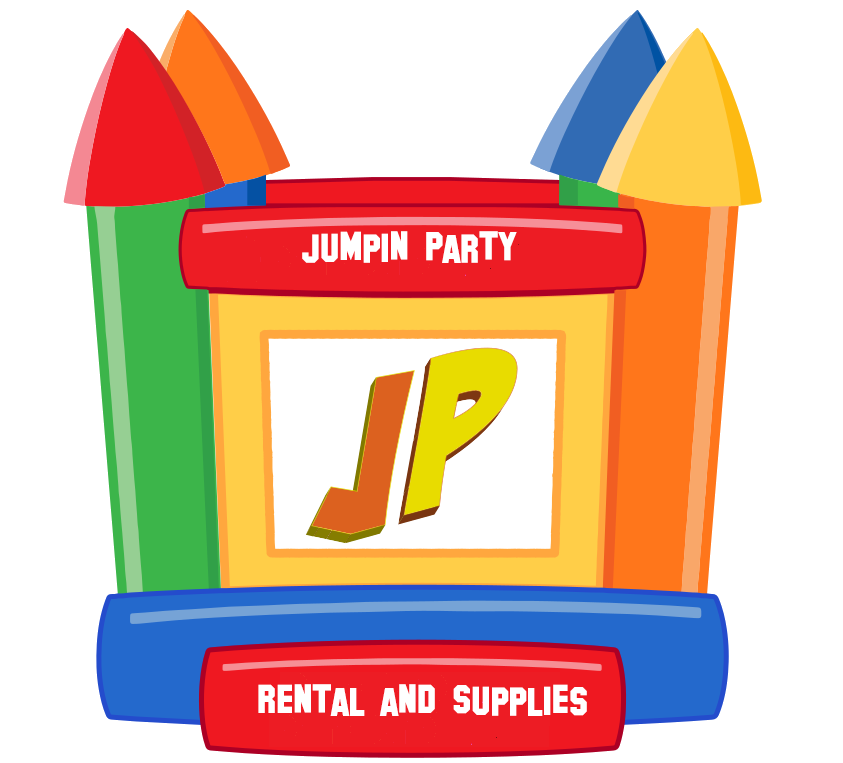
<style>
.page{position:relative;width:843px;height:763px;background:#ffffff}
.page>*{position:absolute;margin:0}
.t1{font:40px "HollywoodHills";color:#ffffff}
</style>
<div class="page">
<p class="t1" style="left:302px;top:231px;width:215px;height:32px">Jumpin Party</p>
<p class="t1" style="left:258px;top:684px;width:329px;height:32px">Rental and Supplies</p>
</div>
